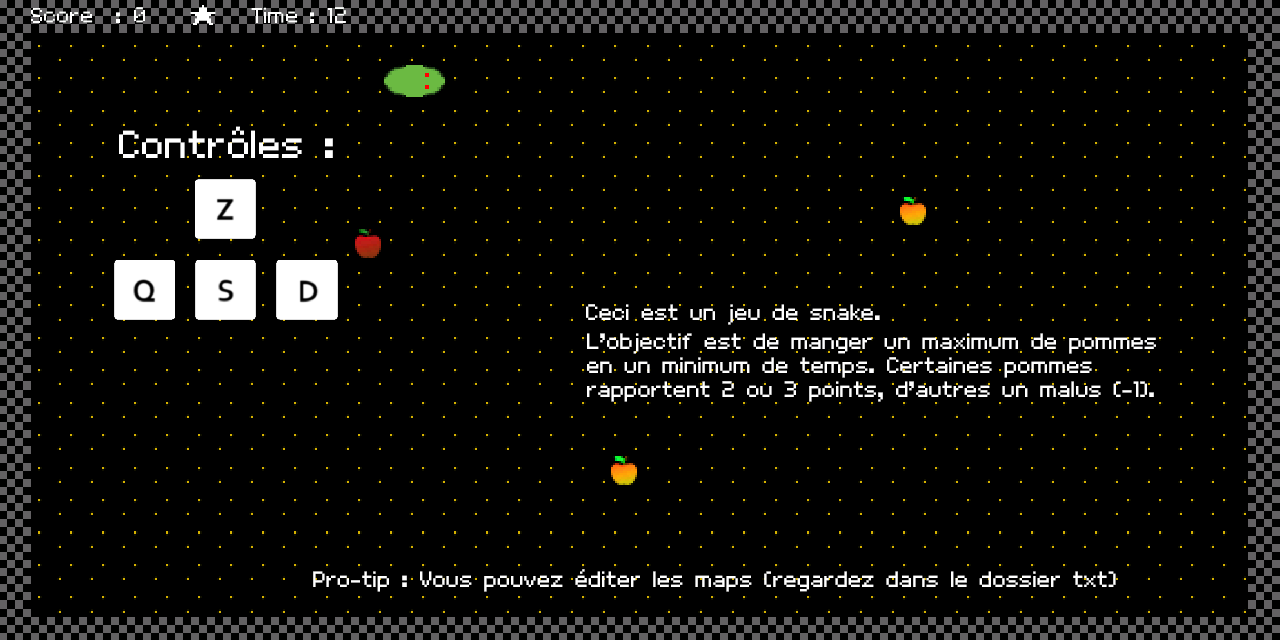
<style>
.page{position:relative;width:1280px;height:640px;background:#000000}
.page>*{position:absolute;margin:0}
.t1{font:35px "VolterGoldfish";color:#ffffff}
.t2{font:20px "VolterGoldfish";color:#ffffff}
</style>
<div class="page">
<p class="t1" style="left:119px;top:126px;width:214px;height:32px">Contrôles :</p>
<p class="t2" style="left:586px;top:304px;width:294px;height:21px">Ceci est un jeu de snake.</p>
<p class="t2" style="left:587px;top:333px;width:569px;height:69px">L’objectif est de manger un maximum de pommes<br>en un minimum de temps. Certaines pommes<br>rapportent 2 ou 3 points, d’autres un malus (-1).</p>
<p class="t2" style="left:313px;top:569px;width:803px;height:23px">Pro-tip : Vous pouvez éditer les maps (regardez dans le dossier txt)</p>
</div>
